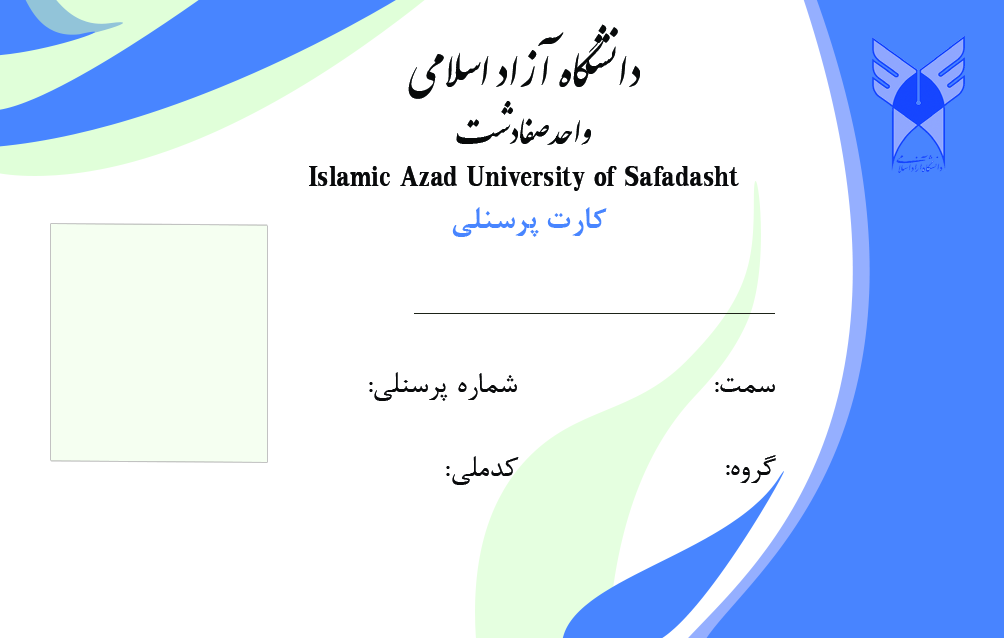
<style>
.page{position:relative;width:1004px;height:638px;background:#ffffff}
.page>*{position:absolute;margin:0}
.t1{font:50px "IranNastaliq";color:#080a0a}
.t2{font:37.5px "IranNastaliq";color:#070909}
.t3{font:41.7px "KodchiangUPCBold";color:#090a0b}
.t4{font:33.3px "BNazaninBold";color:#4885ff}
.t5{font:33.3px "BNazanin";color:#090a0b}
</style>
<div class="page">
<p class="t1" style="left:408px;top:24px;width:232px;height:75px">دانشگاه آزاد اسلامی</p>
<p class="t2" style="left:456px;top:101px;width:135px;height:44px">واحدصفادشت</p>
<p class="t3" style="left:309px;top:166px;width:430px;height:25px">Islamic Azad University of Safadasht</p>
<p class="t4" style="left:452px;top:207px;width:155px;height:30px">کارت پرسنلی</p>
<p class="t5" style="left:369px;top:372px;width:148px;height:29px">شماره پرسنلی:</p>
<p class="t5" style="left:715px;top:378px;width:60px;height:15px">سمت:</p>
<p class="t5" style="left:446px;top:456px;width:73px;height:29px">کدملی:</p>
<p class="t5" style="left:726px;top:455px;width:50px;height:28px">گروه:</p>
</div>
